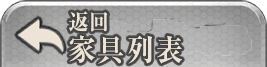
<style>
.page{position:relative;width:267px;height:67px}
.page>*{position:absolute;margin:0}
.t1{font:30px/24px "RyuminPr6N-ExBold";letter-spacing:0.1em;color:#ede4d7;scale:0.9 1}
.t2{font:22px/24px "RyuminPr6N-ExBold";letter-spacing:0.1em;color:#ede4d7;scale:0.9 1}
</style>
<div class="page">
<p class="t1" style="left:69px;top:11px;width:113px;height:53px"><span class="t2">﨤回<br></span>家具列表</p>
</div>
